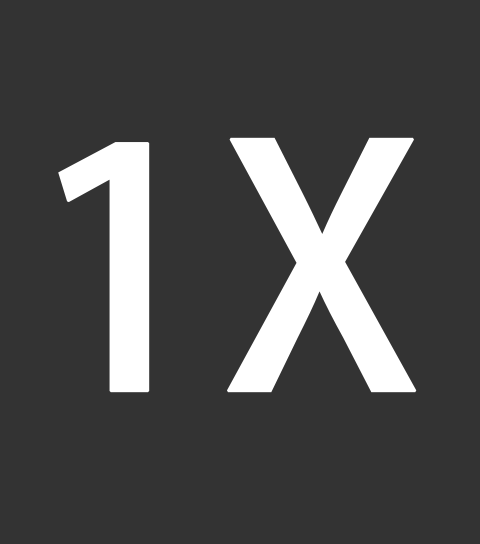
<style>
.page{position:relative;width:480px;height:544px;background:#333333}
.page>*{position:absolute;margin:0}
.t1{font:329px "AdobeHeitiStd-Regular";color:#ffffff;font-weight:bold}
</style>
<div class="page">
<p class="t1" style="left:58px;top:137px;width:359px;height:256px">1X</p>
</div>
